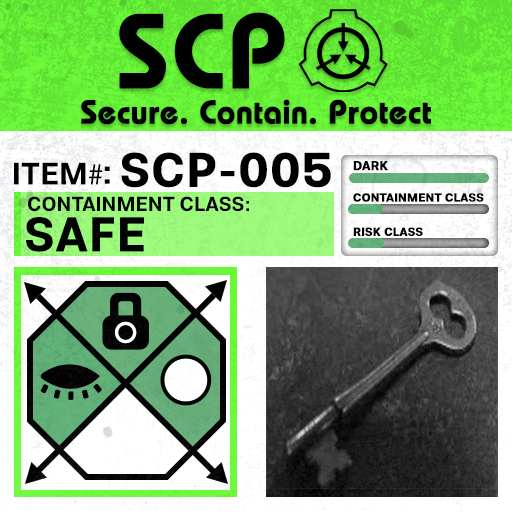
<style>
.page{position:relative;width:512px;height:512px}
.page>*{position:absolute;margin:0}
.t1{font:105.8px "BauhausLT-Demi";color:#000000;font-weight:bold}
.t2{font:33px "BauhausLT-Demi";color:#000000;font-weight:bold}
.t3{font:47.6px "Molde-Semibold";color:#000000;font-weight:bold}
.t4{font:12.5px "Molde-Semibold";color:#000000;font-weight:bold}
.t5{font:31.1px "Molde-Semibold";color:#000000}
.t6{font:31.1px "MyriadPro-Regular";color:#000000}
.t7{font:34.5px "Molde-Semibold";color:#000000}
.t8{font:20.3px "Molde-Semibold";color:#000000}
.t9{font:11.7px "Molde-Semibold";color:#000000;font-weight:bold}
.t10{font:47.8px "Molde-Semibold";color:#000000;font-weight:bold}
</style>
<div class="page">
<p class="t1" style="left:119px;top:12px;width:166px;height:77px">SCP</p>
<p class="t2" style="left:81px;top:99px;width:350px;height:26px">Secure. Contain. Protect</p>
<p class="t3" style="left:121px;top:152px;width:210px;height:36px">SCP-005</p>
<p class="t4" style="left:353px;top:161px;width:35px;height:10px">DARK</p>
<p class="t5" style="left:14px;top:162px;width:89px;height:23px">ITEM<span class="t6">#</span></p>
<p class="t7" style="left:104px;top:166px;width:6px;height:18px">:</p>
<p class="t8" style="left:28px;top:196px;width:221px;height:16px">CONTAINMENT CLASS:</p>
<p class="t9" style="left:353px;top:193px;width:131px;height:9px">CONTAINMENT CLASS</p>
<p class="t10" style="left:26px;top:217px;width:118px;height:35px">SAFE</p>
<p class="t9" style="left:353px;top:227px;width:70px;height:9px">RISK CLASS</p>
</div>
